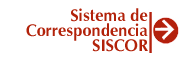
<style>
.page{position:relative;width:180px;height:59px;background:#ffffff}
.page>*{position:absolute;margin:0}
.t1{font:17px/15px "ZapfHumanist601BT-Bold";color:#b2220a;scale:0.95 1}
</style>
<div class="page">
<p class="t1" style="left:26px;top:8px;width:122px;height:44px;text-align:right">Sistema de<br>Correspondencia<br>SISCOR</p>
</div>
